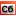
<style>
.page{position:relative;width:16px;height:16px}
.page>*{position:absolute;margin:0}
.t1{font:9px "Arial-BoldMT";color:#000000}
</style>
<div class="page">
<p class="t1" style="left:2px;top:5px;width:11px;height:8px">Сб</p>
</div>
